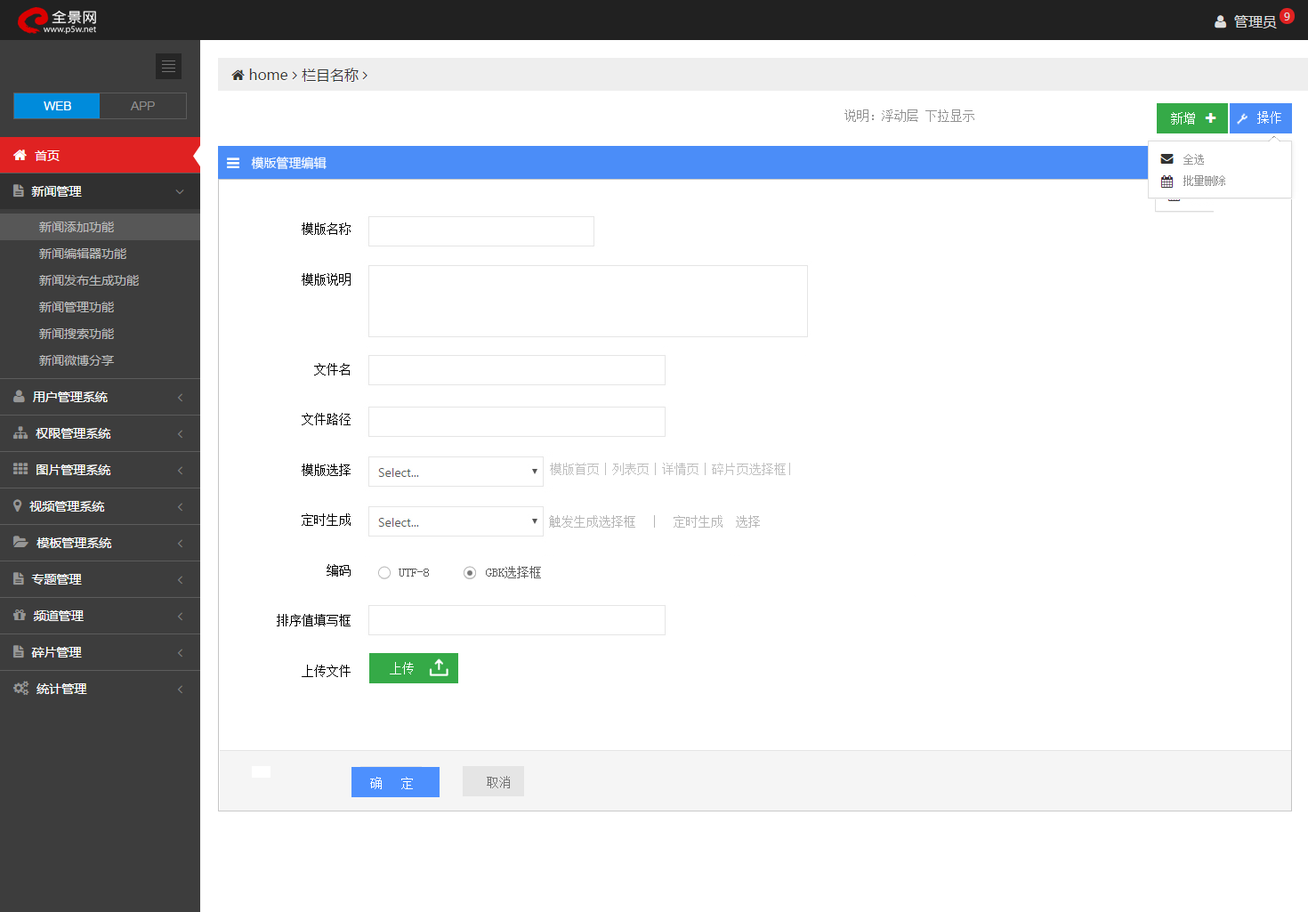
<style>
.page{position:relative;width:1308px;height:912px;background:#ffffff}
.page>*{position:absolute;margin:0}
.t1{font:12.5px "SimSun";color:#929292}
.t2{font:12.5px "SimSun";color:#ffffff}
.t3{font:12.5px "MicrosoftYaHei";color:#ffffff}
.t4{font:10.7px/21.4px "SimSun";color:#929292}
.t5{font:12.5px/50.3px "NSimSun";color:#000000}
.t6{font:12.5px "NSimSun";color:#bfbfbf}
.t7{font:12.5px "NSimSun";color:#b6b6b6}
.t8{font:12.5px "NSimSun";color:#5d5d5d}
.t9{font:12.5px "NSimSun";color:#ffffff}
.t10{font:12.5px "SimSun";color:#737373}
</style>
<div class="page">
<p class="t1" style="left:844px;top:109px;width:130px;height:13px">说明：浮动层 下拉显示</p>
<p class="t2" style="left:1171px;top:112px;width:24px;height:13px">新增</p>
<p class="t2" style="left:1257px;top:111px;width:24px;height:13px">操作</p>
<p class="t3" style="left:251px;top:157px;width:75px;height:13px">模版管理编辑</p>
<p class="t4" style="left:1183px;top:154px;width:42px;height:32px">全选<br>批量删除</p>
<p class="t5" style="left:277px;top:222px;width:74px;height:455px;text-align:right">模版名称<br>模版说明<br><br>文件名<br>文件路径<br>模版选择<br>定时生成<br>编码<br>排序值填写框<br>上传文件</p>
<p class="t6" style="left:550px;top:463px;width:240px;height:12px">模版首页｜列表页｜详情页｜碎片页选择框|</p>
<p class="t7" style="left:549px;top:515px;width:211px;height:13px">触发生成选择框  ｜  定时生成  选择</p>
<p class="t8" style="left:399px;top:566px;width:142px;height:12px">UTF-8         GBK选择框</p>
<p class="t9" style="left:390px;top:662px;width:24px;height:12px">上传</p>
<p class="t2" style="left:370px;top:777px;width:43px;height:12px">确   定</p>
<p class="t10" style="left:487px;top:776px;width:23px;height:12px">取消</p>
</div>
